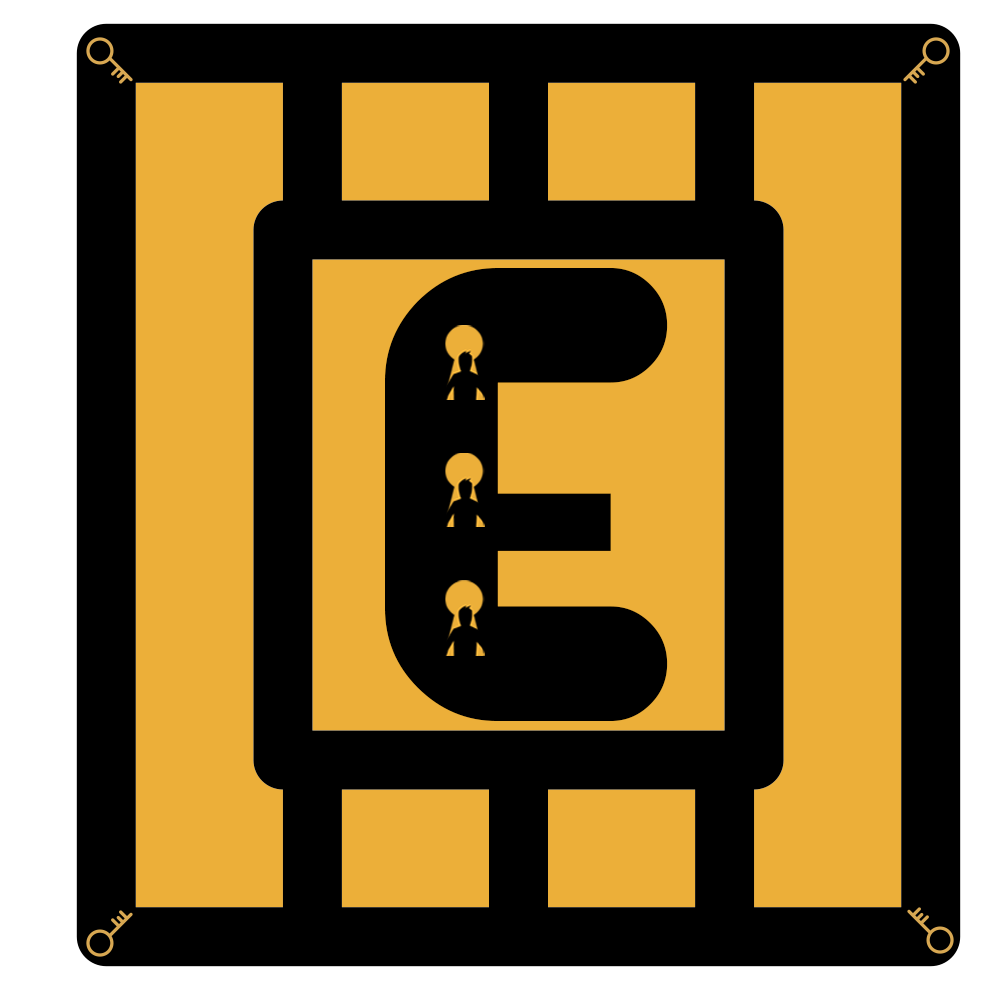
<style>
.page{position:relative;width:1000px;height:1000px;background:#000000}
.page>*{position:absolute;margin:0}
.t1{font:902.5px "Roundy";letter-spacing:0.001em;color:#000000}
</style>
<div class="page">
<p class="t1" style="left:385px;top:268px;width:283px;height:453px">E</p>
</div>
